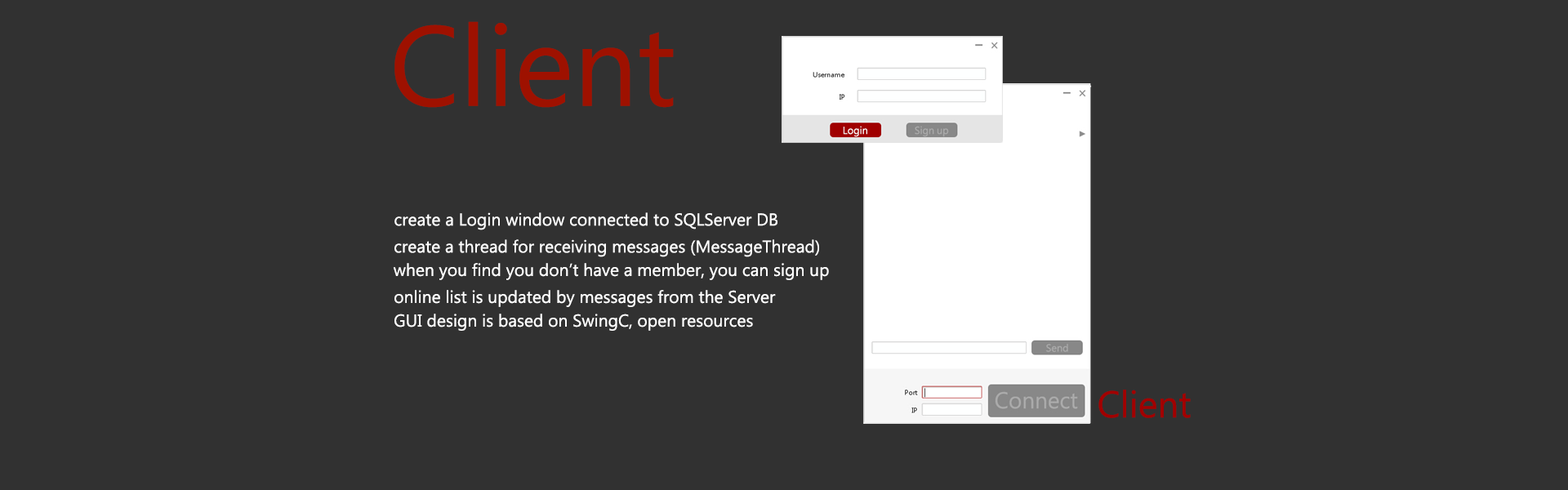
<style>
.page{position:relative;width:1568px;height:490px;background:#313131}
.page>*{position:absolute;margin:0}
.t1{font:113.4px "MicrosoftNewTaiLue";color:#9e1100}
.t2{font:17.1px "MicrosoftNewTaiLue";color:#ffffff}
.t3{font:37.1px "MicrosoftNewTaiLue";color:#a10000}
</style>
<div class="page">
<p class="t1" style="left:394px;top:21px;width:280px;height:87px">Client</p>
<p class="t2" style="left:394px;top:212px;width:383px;height:18px">create a Login window connected to SQLServer DB</p>
<p class="t2" style="left:394px;top:239px;width:425px;height:18px">create a thread for receiving messages (MessageThread)</p>
<p class="t2" style="left:393px;top:263px;width:436px;height:17px">when you find you don’t have a member, you can sign up</p>
<p class="t2" style="left:394px;top:290px;width:382px;height:17px">online list is updated by messages from the Server</p>
<p class="t2" style="left:394px;top:314px;width:359px;height:17px">GUI design is based on SwingC, open resources</p>
<p class="t3" style="left:1098px;top:390px;width:93px;height:28px">Client</p>
</div>
